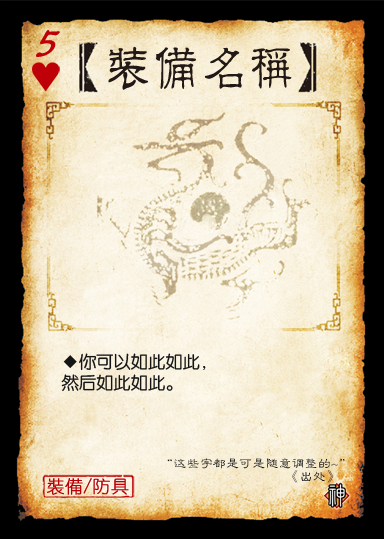
<style>
.page{position:relative;width:384px;height:539px}
.page>*{position:absolute;margin:0}
.t1{font:48.1px "Jxixinkai";color:#be0008;font-weight:bold;font-style:italic}
.t2{font:50.2px "¾­µä·±½ÇÁ¥ Regular";color:#221815;scale:0.95 1}
.t3{font:17.5px/21.8px "FZY3JW--GB1-0";letter-spacing:-0.01em;color:#151515}
.t4{font:13.1px/13.1px "FZLBJW--GB1-0";color:#151515}
.t5{font:17.5px "YouYuan";color:#ba0007;font-weight:bold}
</style>
<div class="page">
<p class="t1" style="left:36px;top:30px;width:24px;height:27px">5</p>
<p class="t2" style="left:108px;top:46px;width:184px;height:44px">装备名称</p>
<p class="t3" style="left:61px;top:353px;width:145px;height:38px">◆你可以如此如此，<br>然后如此如此。</p>
<p class="t4" style="left:167px;top:458px;width:178px;height:25px;text-align:right">“这些字都是可是随意调整的~”<br>                                      《出处》</p>
<p class="t5" style="left:47px;top:478px;width:82px;height:17px">裝備/防具</p>
</div>
